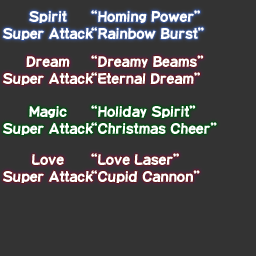
<style>
.page{position:relative;width:256px;height:256px;background:#333333}
.page>*{position:absolute;margin:0}
.t1{font:14px/17px "DFPOP1-W12-WINP-RKSJ-H";color:#ffffff}
</style>
<div class="page">
<p class="t1" style="left:2px;top:11px;width:92px;height:29px;text-align:center">Spirit<br>Super Attack</p>
<p class="t1" style="left:91px;top:10px;width:113px;height:29px">“Homing Power”<br>“Rainbow Burst”</p>
<p class="t1" style="left:2px;top:56px;width:92px;height:29px;text-align:center">Dream<br>Super Attack</p>
<p class="t1" style="left:91px;top:55px;width:113px;height:29px">“Dreamy Beams”<br>“Eternal Dream”</p>
<p class="t1" style="left:2px;top:106px;width:92px;height:29px;text-align:center">Magic<br>Super Attack</p>
<p class="t1" style="left:91px;top:105px;width:126px;height:29px">“Holiday Spirit”<br>“Christmas Cheer”</p>
<p class="t1" style="left:2px;top:154px;width:92px;height:29px;text-align:center">Love<br>Super Attack</p>
<p class="t1" style="left:91px;top:153px;width:109px;height:30px">“Love Laser”<br>“Cupid Cannon”</p>
</div>
